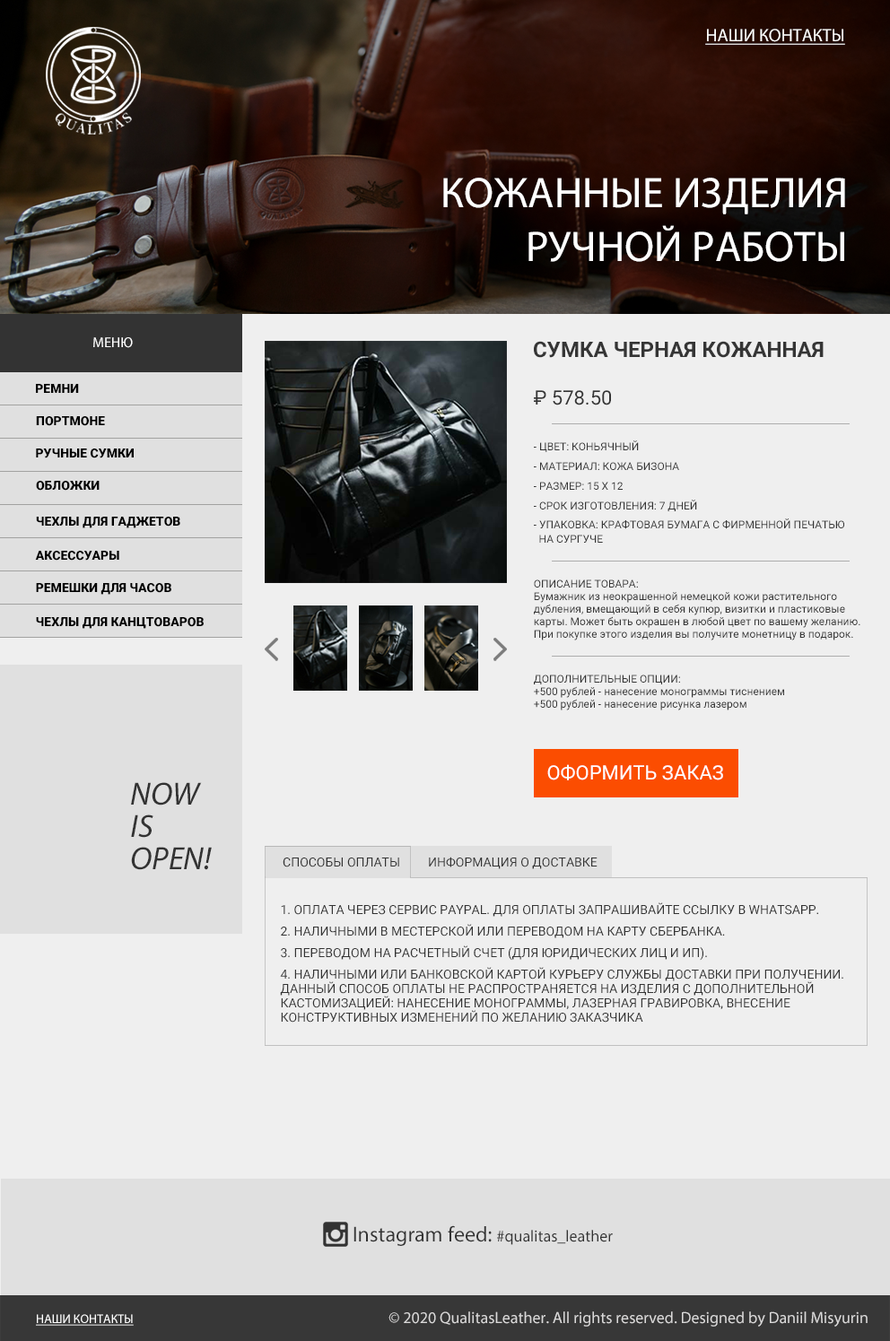
<style>
.page{position:relative;width:890px;height:1341px;background:#efefef}
.page>*{position:absolute;margin:0}
.t1{font:17.9px "MyriadPro-Regular";color:#ffffff;text-transform:uppercase;text-decoration:underline}
.t2{font:43px/53.8px "MyriadPro-Regular";color:#ffffff;text-transform:uppercase}
.t3{font:14.3px "MyriadPro-Regular";color:#ffffff;text-transform:uppercase}
.t4{font:21.5px "Roboto-Bold";color:#353535;text-transform:uppercase}
.t5{font:12.6px "Roboto-Black";color:#000000;text-transform:uppercase}
.t6{font:19.7px "Roboto-Regular";color:#353535;text-transform:uppercase}
.t7{font:10.8px "Roboto-Regular";color:#353535;text-transform:uppercase}
.t8{font:10.8px/14.3px "Roboto-Regular";color:#353535;text-transform:uppercase}
.t9{font:10.8px/53.8px "Roboto-Regular";color:#353535;text-transform:uppercase}
.t10{font:10.8px/12.6px "Roboto-Regular";color:#353535}
.t11{font:10.8px/12.6px "Roboto-Regular";color:#353535;text-transform:uppercase}
.t12{font:19.7px "Roboto-Regular";color:#ffffff;text-transform:uppercase}
.t13{font:32.3px/32.3px "MyriadPro-It";color:#333333;text-transform:uppercase}
.t14{font:12.6px "Roboto-Regular";color:#333333;text-transform:uppercase}
.t15{font:12.6px/21.5px "Roboto-Regular";color:#333333;text-transform:uppercase}
.t16{font:12.6px/14.3px "Roboto-Regular";color:#333333;text-transform:uppercase}
.t17{font:16.1px "MyriadPro-Regular";color:#333333}
.t18{font:21.5px "MyriadPro-Regular";color:#333333}
.t19{font:12.6px "MyriadPro-Regular";color:#ffffff;text-transform:uppercase;text-decoration:underline}
.t20{font:16.1px "MyriadPro-Regular";color:#dad9d9}
</style>
<div class="page">
<p class="t1" style="left:705px;top:29px;width:140px;height:16px">НАШИ КОНТАКТЫ</p>
<p class="t2" style="left:443px;top:178px;width:402px;height:84px;text-align:right">Кожанные изделия<br>ручной работы</p>
<p class="t3" style="left:93px;top:337px;width:40px;height:11px">Меню</p>
<p class="t4" style="left:534px;top:341px;width:289px;height:17px">Сумка черная кожанная</p>
<p class="t5" style="left:36px;top:384px;width:43px;height:9px">РЕМНИ</p>
<p class="t6" style="left:534px;top:390px;width:77px;height:15px">₽ 578.50</p>
<p class="t5" style="left:36px;top:416px;width:69px;height:10px">ПОРТМОНЕ</p>
<p class="t5" style="left:36px;top:448px;width:98px;height:10px">РУЧНЫЕ СУМКИ</p>
<p class="t7" style="left:534px;top:440px;width:104px;height:12px">- цвет: коньячный</p>
<p class="t7" style="left:534px;top:462px;width:145px;height:8px">- материал: кожа бизона</p>
<p class="t5" style="left:36px;top:481px;width:64px;height:9px">ОБЛОЖКИ</p>
<p class="t7" style="left:534px;top:482px;width:88px;height:8px">- размер: 15 х 12</p>
<p class="t7" style="left:534px;top:499px;width:163px;height:12px">- срок изготовления: 7 дней</p>
<p class="t5" style="left:36px;top:516px;width:144px;height:12px">ЧЕХЛЫ ДЛЯ ГАДЖЕТОВ</p>
<p class="t8" style="left:534px;top:518px;width:310px;height:24px"><span class="t9">-</span> упаковка: крафтовая бумага с фирменной печатью <br>  на сургуче</p>
<p class="t5" style="left:35px;top:551px;width:84px;height:9px">АКСЕСсУАРЫ</p>
<p class="t10" style="left:534px;top:579px;width:326px;height:61px"><span class="t11">описание товара: </span><br>Бумажник из неокрашенной немецкой кожи растительного <br>дубления, вмещающий в себя купюр, визитки и пластиковые <br>карты. Может быть окрашен в любой цвет по вашему желанию. <br>При покупке этого изделия вы получите монетницу в подарок.</p>
<p class="t5" style="left:36px;top:583px;width:135px;height:12px">РЕМЕШКИ ДЛЯ ЧАСОВ</p>
<p class="t5" style="left:36px;top:617px;width:168px;height:12px">ЧЕХЛЫ ДЛЯ КАНЦТОВАРОВ</p>
<p class="t10" style="left:534px;top:674px;width:250px;height:36px"><span class="t11">Дополнительные опции:  </span><br>+500 рублей - нанесение монограммы тиснением<br>+500 рублей - нанесение рисунка лазером</p>
<p class="t12" style="left:547px;top:764px;width:176px;height:16px">оформить заказ</p>
<p class="t13" style="left:131px;top:782px;width:81px;height:88px">NOw<br>is<br>open!</p>
<p class="t14" style="left:282px;top:857px;width:117px;height:10px">способы оплаты</p>
<p class="t14" style="left:429px;top:856px;width:168px;height:13px">Информация о доставке</p>
<p class="t15" style="left:280px;top:902px;width:563px;height:120px">1. Оплата через сервис PayPal. Для оплаты запрашивайте ссылку в WhatsApp.<br>2. Наличными в местерской или переводом на карту Сбербанка.<br>3. Переводом на расчетный счет (для юридических лиц и ИП).<br>4. Наличными или банковской картой курьеру службы доставки при получении. <br><span class="t16">Данный способ оплаты не распространяется на изделия с дополнительной <br>кастомизацией: нанесение монограммы, лазерная гравировка, внесение <br>конструктивных изменений по желанию заказчика</span></p>
<p class="t17" style="left:353px;top:1225px;width:259px;height:20px"><span class="t18"><br>Instagram feed: </span>#qualitas_leather</p>
<p class="t19" style="left:36px;top:1314px;width:98px;height:11px">Наши контакты</p>
<p class="t20" style="left:388px;top:1311px;width:479px;height:15px">© 2020 QualitasLeather. All rights reserved. Designed by Daniil Misyurin</p>
</div>
